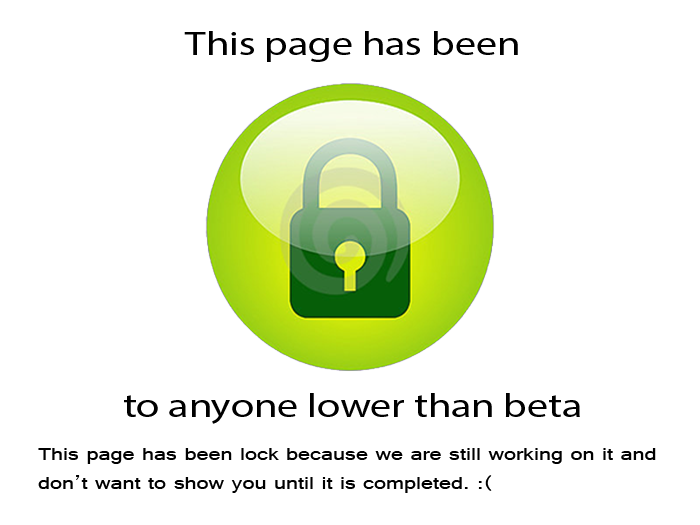
<style>
.page{position:relative;width:700px;height:525px;background:#ffffff}
.page>*{position:absolute;margin:0}
.t1{font:33.6px "RazerRegular";color:#000000;scale:1.25 1}
.t2{font:19.2px "Raavi";color:#000000;scale:1.25 1}
</style>
<div class="page">
<p class="t1" style="left:184px;top:31px;width:334px;height:31px">This page has been</p>
<p class="t1" style="left:124px;top:393px;width:456px;height:31px">to anyone lower than beta</p>
<p class="t2" style="left:38px;top:448px;width:618px;height:45px">This page has been lock because we are still working on it and<br>don’t want to show you until it is completed. :(</p>
</div>
